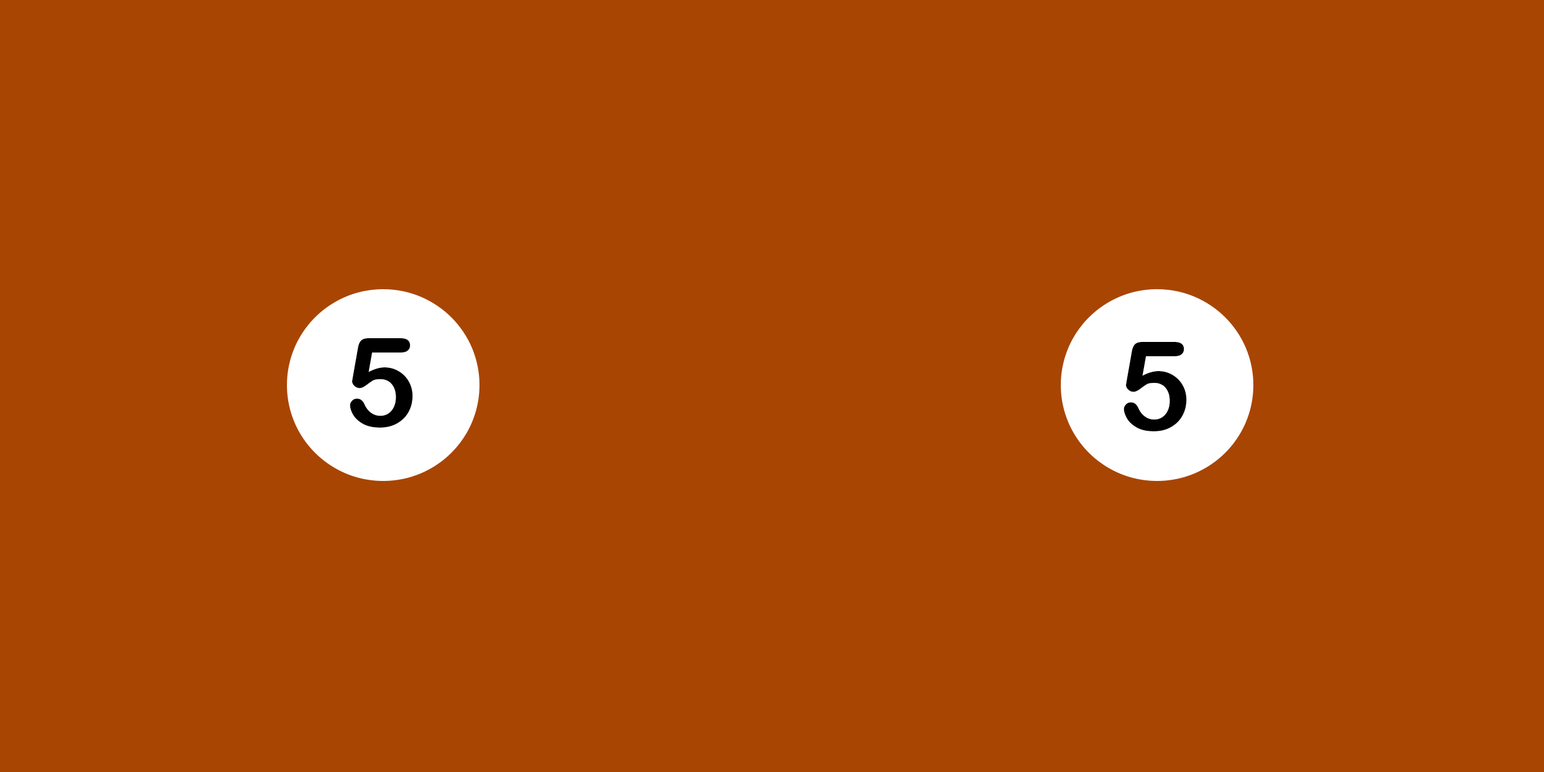
<style>
.page{position:relative;width:1544px;height:772px;background:#a84503}
.page>*{position:absolute;margin:0}
.t1{font:124.2px "ArialRoundedMTBold";letter-spacing:-0.025em;color:#000000}
</style>
<div class="page">
<p class="t1" style="left:350px;top:338px;width:63px;height:90px">5</p>
<p class="t1" style="left:1123px;top:342px;width:64px;height:90px">5</p>
</div>
